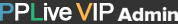
<style>
.page{position:relative;width:178px;height:24px;background:#333333}
.page>*{position:absolute;margin:0}
.t1{font:24px "ArialMT";letter-spacing:-0.05em;color:#ffffff;font-weight:bold}
.t2{font:24px "ArialMT";letter-spacing:-0.05em;color:#4e9fbb;font-weight:bold}
.t3{font:24px "ArialMT";letter-spacing:-0.05em;color:#28b779;font-weight:bold}
.t4{font:24px "ArialMT";letter-spacing:-0.05em;color:#ffb848;font-weight:bold}
</style>
<div class="page">
<p class="t1" style="left:0px;top:3px;width:72px;height:18px"><span class="t2">P</span>P<span class="t3">L</span>ive</p>
<p class="t1" style="left:76px;top:3px;width:38px;height:18px"><span class="t4">V</span>IP</p>
</div>
